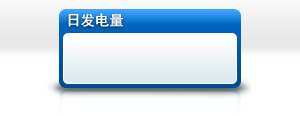
<style>
.page{position:relative;width:300px;height:116px;background:#ffffff}
.page>*{position:absolute;margin:0}
.t1{font:14px "SimHei";color:#ffffff;font-weight:bold}
</style>
<div class="page">
<p class="t1" style="left:68px;top:13px;width:56px;height:14px">日发电量</p>
</div>
